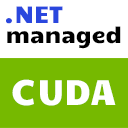
<style>
.page{position:relative;width:128px;height:128px;background:#76b900}
.page>*{position:absolute;margin:0}
.t1{font:24px "Candal";color:#2a47de}
.t2{font:22px "Candal";letter-spacing:-0.005em;color:#000000}
.t3{font:36px "Candal";color:#ffffff}
</style>
<div class="page">
<p class="t1" style="left:6px;top:6px;width:57px;height:18px">.NET</p>
<p class="t2" style="left:7px;top:26px;width:114px;height:23px">managed</p>
<p class="t3" style="left:12px;top:79px;width:104px;height:27px">CUDA</p>
</div>
